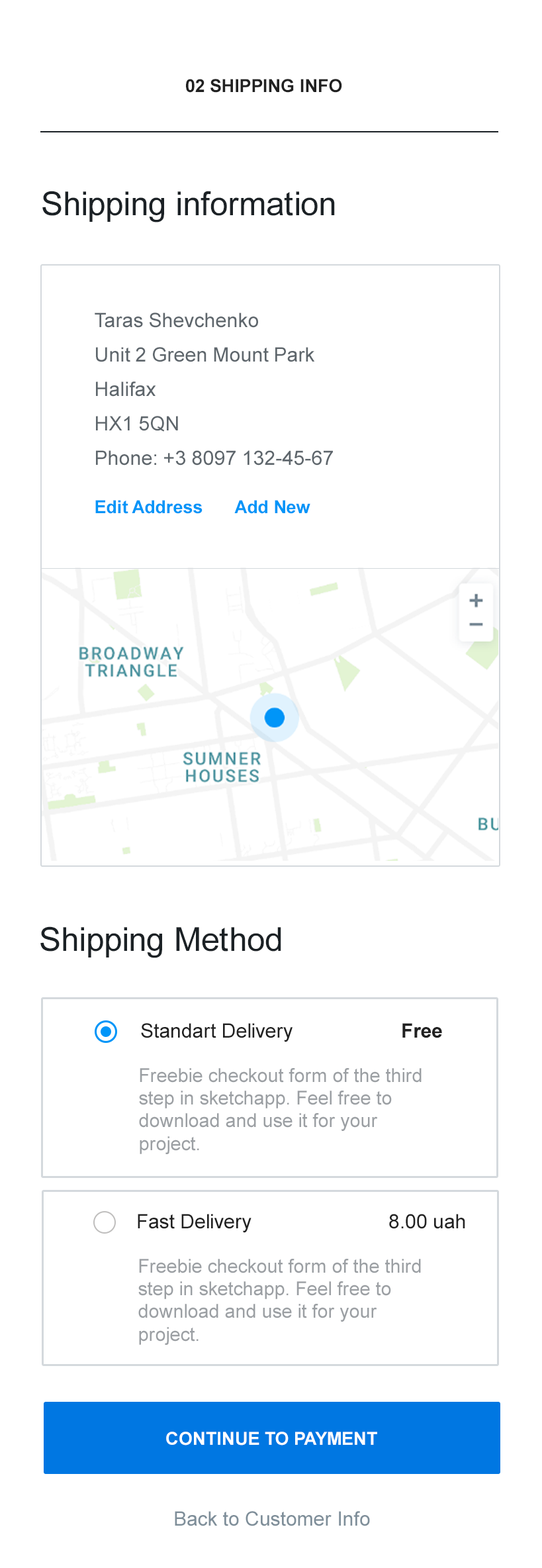
<style>
.page{position:relative;width:542px;height:1568px;background:#ffffff}
.page>*{position:absolute;margin:0}
.t1{font:17.9px "Arial-BoldMT";color:#212121;text-transform:uppercase}
.t2{font:33px "ArialMT";color:#1b2125}
.t3{font:19.9px/34.4px "ArialMT";color:#5e666c}
.t4{font:17.9px "Arial-BoldMT";color:#0095f8}
.t5{font:19.9px "ArialMT";color:#212121}
.t6{font:19.9px "Arial-BoldMT";color:#212121}
.t7{font:19px "ArialMT";color:#9b9fa3}
.t8{font:17.9px "Arial-BoldMT";color:#ffffff;text-transform:uppercase}
.t9{font:19.9px "ArialMT";color:#7e8e99}
</style>
<div class="page">
<p class="t1" style="left:186px;top:79px;width:156px;height:14px">02 Shipping info</p>
<p class="t2" style="left:42px;top:191px;width:293px;height:31px">Shipping information</p>
<p class="t3" style="left:95px;top:313px;width:238px;height:153px">Taras Shevchenko<br>Unit 2 Green Mount Park<br>Halifax<br>HX1 5QN<br>Phone: +3 8097 132-45-67</p>
<p class="t4" style="left:95px;top:500px;width:108px;height:14px">Edit Address</p>
<p class="t4" style="left:234px;top:500px;width:77px;height:14px">Add New</p>
<p class="t2" style="left:40px;top:926px;width:241px;height:32px">Shipping Method</p>
<p class="t5" style="left:141px;top:1023px;width:152px;height:19px">Standart Delivery</p>
<p class="t6" style="left:403px;top:1023px;width:39px;height:15px">Free</p>
<p class="t7" style="left:139px;top:1068px;width:283px;height:86px">Freebie checkout form of the third step in sketchapp. Feel free to download and use it for your project.</p>
<p class="t5" style="left:138px;top:1214px;width:114px;height:19px">Fast Delivery</p>
<p class="t5" style="left:389px;top:1214px;width:77px;height:15px">8.00 uah</p>
<p class="t7" style="left:138px;top:1259px;width:283px;height:86px">Freebie checkout form of the third step in sketchapp. Feel free to download and use it for your project.</p>
<p class="t8" style="left:166px;top:1432px;width:211px;height:14px">Continue to Payment</p>
<p class="t9" style="left:175px;top:1511px;width:195px;height:15px">Back to Customer Info</p>
</div>
